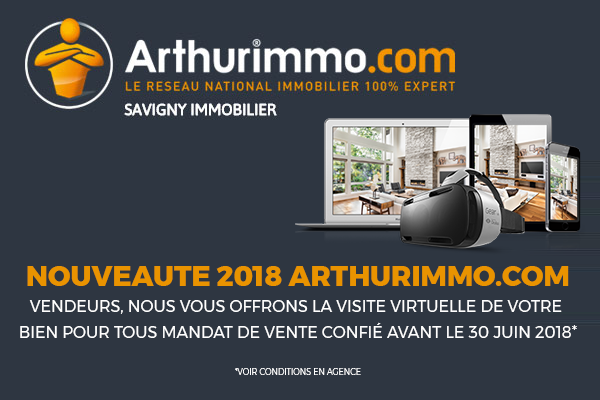
<style>
.page{position:relative;width:600px;height:400px;background:#2e3641}
.page>*{position:absolute;margin:0}
.t1{font:16px/26px "Montserrat-Regular";color:#ffffff;text-transform:uppercase}
.t2{font:28px/26px "Montserrat-ExtraBold";color:#e99300;text-transform:uppercase}
.t3{font:8px "Montserrat-Light";color:#ffffff;text-transform:uppercase}
</style>
<div class="page">
<p class="t1" style="left:20px;top:266px;width:557px;height:72px;text-align:center"><span class="t2">NOUVEAUTE 2018 ARTHURIMMO.COM<br></span>Vendeurs, nous vous offrons la visite virtuelle de votre <br>bien pour tous mandat de vente confié avant le 30 Juin 2018*</p>
<p class="t3" style="left:235px;top:368px;width:126px;height:7px">*Voir conditions en agence</p>
</div>
